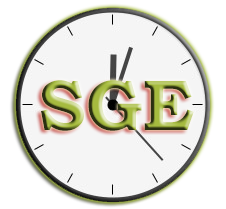
<style>
.page{position:relative;width:226px;height:209px;background:#ffffff}
.page>*{position:absolute;margin:0}
.t1{font:72px "BookmanOldStyle-Bold"}
</style>
<div class="page">
<p class="t1" style="left:41px;top:80px;width:153px;height:51px">SGE</p>
</div>
